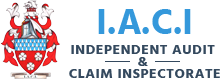
<style>
.page{position:relative;width:220px;height:80px;background:#ffffff}
.page>*{position:absolute;margin:0}
.t1{font:36px "Hind-Bold";color:#3498db}
.t2{font:14px/12px "Hind-Bold";letter-spacing:0.04em;color:#34495e}
</style>
<div class="page">
<p class="t1" style="left:98px;top:9px;width:93px;height:25px">I.A.C.I</p>
<p class="t2" style="left:69px;top:45px;width:151px;height:33px;text-align:center">INDEPENDENT AUDIT <br>&amp; <br>CLAIM INSPECTORATE</p>
</div>
